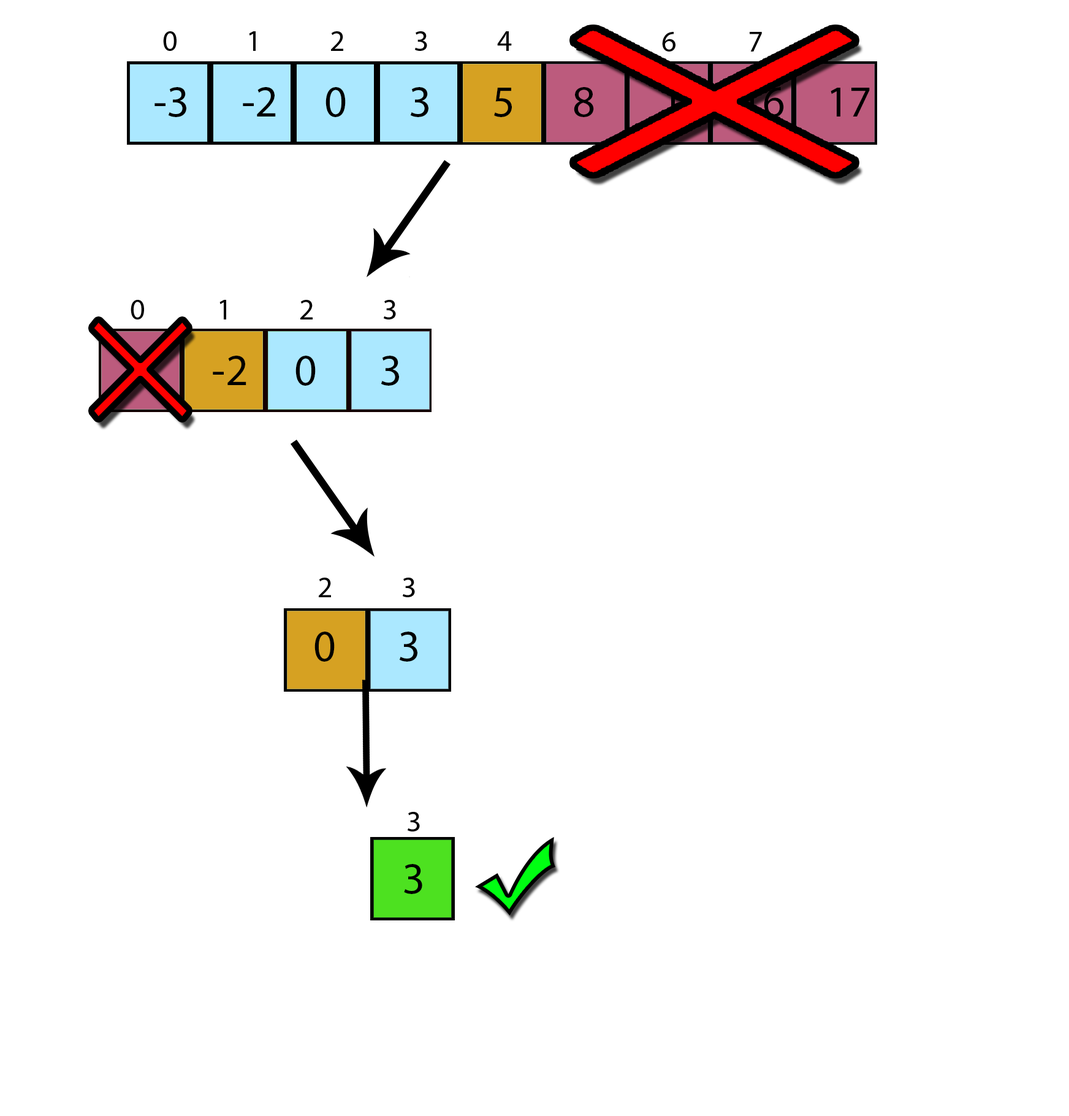
<style>
.page{position:relative;width:1069px;height:1116px;background:#ffffff}
.page>*{position:absolute;margin:0}
.t1{font:29.4px "MyriadPro-Regular";color:#000000}
.t2{font:44.1px "MyriadPro-Regular";color:#000000}
.t3{font:29.5px "MyriadPro-Regular";color:#000000}
</style>
<div class="page">
<p class="t1" style="left:662px;top:32px;width:13px;height:19px">6</p>
<p class="t1" style="left:750px;top:32px;width:12px;height:19px">7</p>
<p class="t2" style="left:154px;top:87px;width:32px;height:30px">-3</p>
<p class="t2" style="left:243px;top:87px;width:33px;height:29px">-2</p>
<p class="t2" style="left:325px;top:87px;width:21px;height:30px">0</p>
<p class="t2" style="left:410px;top:87px;width:18px;height:30px">3</p>
<p class="t2" style="left:494px;top:88px;width:18px;height:29px">5</p>
<p class="t2" style="left:574px;top:87px;width:20px;height:30px">8</p>
<p class="t2" style="left:744px;top:87px;width:40px;height:30px">16</p>
<p class="t2" style="left:831px;top:88px;width:39px;height:28px">17</p>
<p class="t1" style="left:131px;top:300px;width:13px;height:19px">0</p>
<p class="t1" style="left:219px;top:300px;width:7px;height:19px">1</p>
<p class="t1" style="left:300px;top:300px;width:13px;height:19px">2</p>
<p class="t1" style="left:384px;top:300px;width:12px;height:19px">3</p>
<p class="t2" style="left:213px;top:355px;width:33px;height:30px">-2</p>
<p class="t2" style="left:295px;top:355px;width:21px;height:31px">0</p>
<p class="t2" style="left:381px;top:355px;width:18px;height:31px">3</p>
<p class="t1" style="left:319px;top:577px;width:12px;height:20px">2</p>
<p class="t1" style="left:403px;top:577px;width:12px;height:20px">3</p>
<p class="t2" style="left:314px;top:631px;width:21px;height:30px">0</p>
<p class="t2" style="left:399px;top:631px;width:18px;height:30px">3</p>
<p class="t3" style="left:408px;top:812px;width:12px;height:19px">3</p>
<p class="t2" style="left:404px;top:864px;width:18px;height:30px">3</p>
</div>
